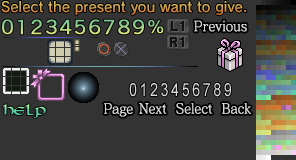
<style>
.page{position:relative;width:296px;height:160px;background:#333333}
.page>*{position:absolute;margin:0}
.t1{font:14px "RodinNTLGPro-DB"}
.t2{font:14px "MatissePro-M";color:#dbdbdb;scale:0.9 1}
</style>
<div class="page">
<p class="t1" style="left:1px;top:1px;width:245px;height:14px">Select the present you want to give.</p>
<p class="t2" style="left:194px;top:20px;width:53px;height:12px">Previous</p>
<p class="t2" style="left:104px;top:103px;width:29px;height:14px">Page</p>
<p class="t2" style="left:139px;top:103px;width:113px;height:11px">Next  Select  Back</p>
</div>
